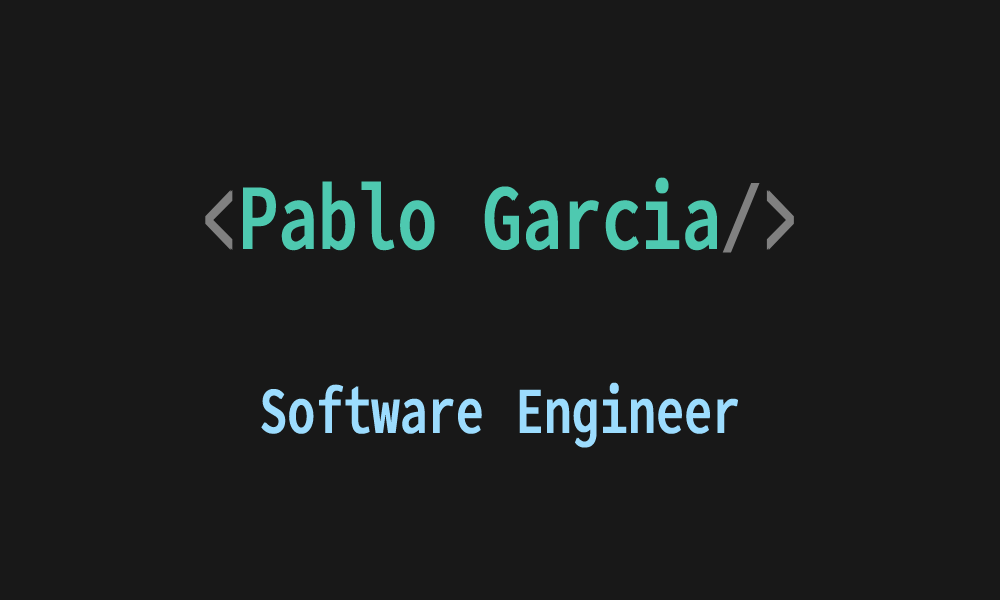
<style>
.page{position:relative;width:1000px;height:600px;background:#181818}
.page>*{position:absolute;margin:0}
.t1{font:93.1px "OfficeCodePro-Medium";color:#4ec9b0;font-weight:bold;scale:0.71 1}
.t2{font:93.1px "OfficeCodePro-Medium";color:#808080;font-weight:bold;scale:0.71 1}
.t3{font:65.7px "OfficeCodePro-Medium";color:#9cdcfe;font-weight:bold;scale:0.71 1}
</style>
<div class="page">
<p class="t1" style="left:205px;top:177px;width:589px;height:76px"><span class="t2">&lt;</span>Pablo Garcia<span class="t2">/&gt;</span></p>
<p class="t3" style="left:261px;top:382px;width:478px;height:66px">Software Engineer</p>
</div>
